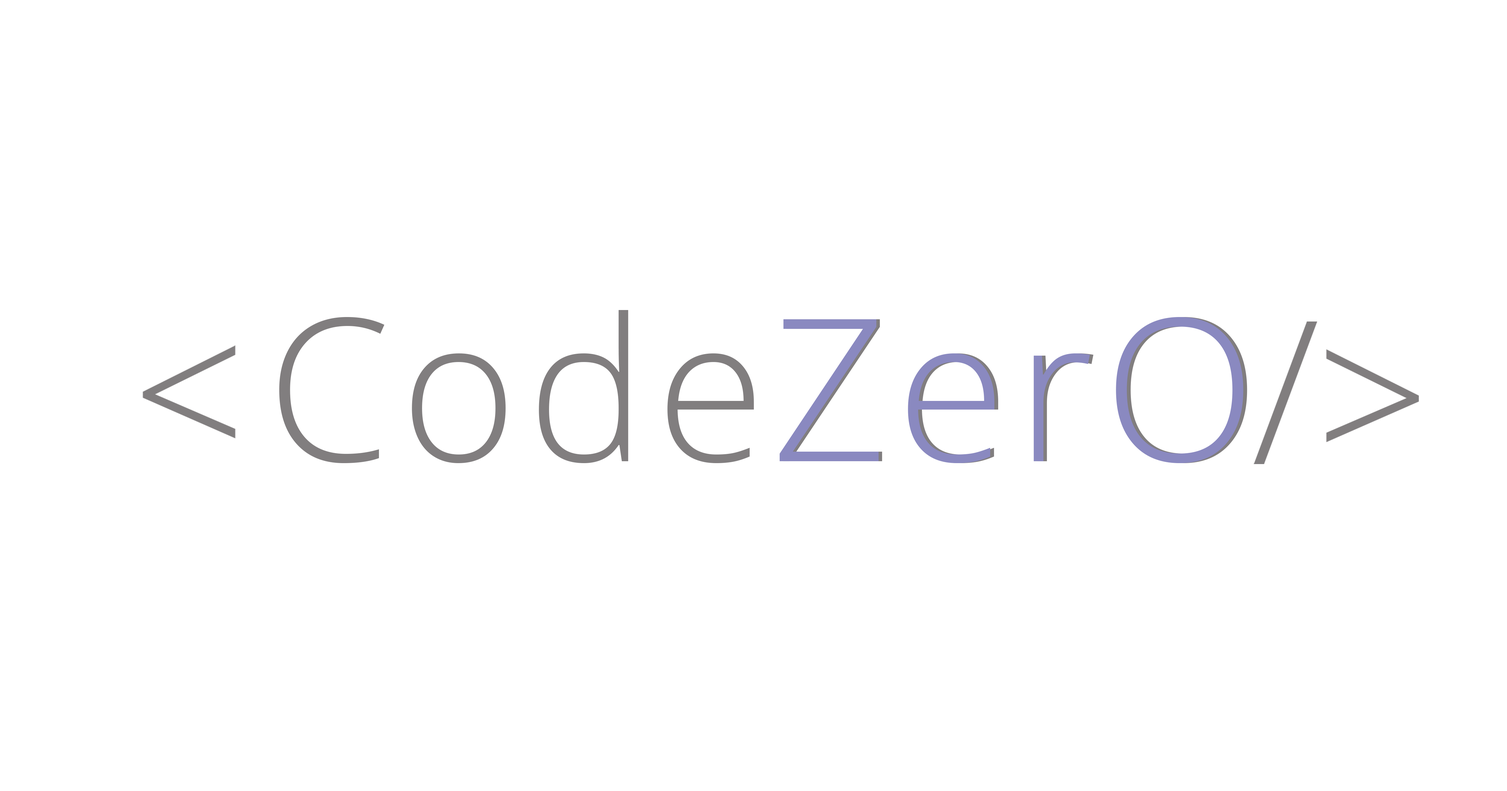
<style>
.page{position:relative;width:1507px;height:791px;background:#ffffff}
.page>*{position:absolute;margin:0}
.t1{font:199.2px "OpenSans-Light";letter-spacing:0.05em}
.t2{font:199.2px "OpenSans-Light";letter-spacing:0.05em;color:#8a89c0}
</style>
<div class="page">
<p class="t1" style="left:279px;top:310px;width:968px;height:153px">CodeZerO</p>
<p class="t2" style="left:780px;top:317px;width:464px;height:146px">ZerO</p>
</div>
